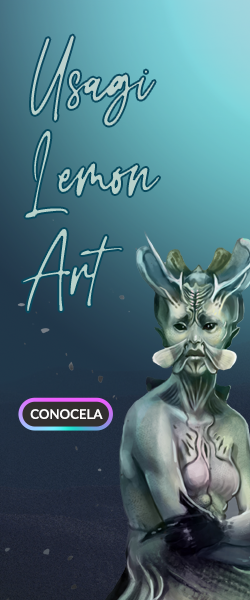
<style>
.page{position:relative;width:250px;height:600px}
.page>*{position:absolute;margin:0}
.t1{font:40px "CarolinaSignature"}
.t2{font:13.2px "Lato-Semibold";color:#ffffff}
</style>
<div class="page">
<p class="t1" style="left:22px;top:34px;width:138px;height:279px">Usagi          Lemon          Art</p>
<p class="t2" style="left:30px;top:409px;width:73px;height:10px">CONOCELA</p>
</div>
